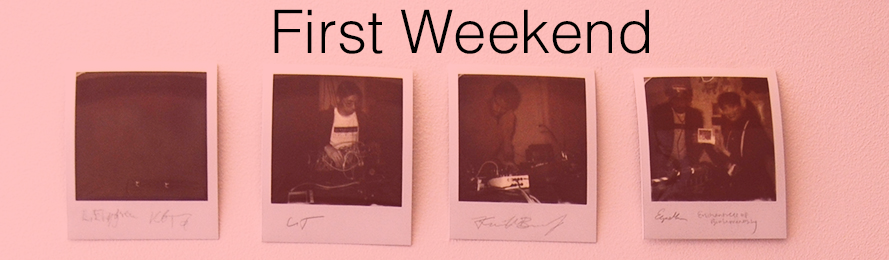
<style>
.page{position:relative;width:889px;height:260px}
.page>*{position:absolute;margin:0}
.t1{font:60px "Helvetica-Light";color:#000000}
</style>
<div class="page">
<p class="t1" style="left:274px;top:9px;width:375px;height:45px">First Weekend</p>
</div>
